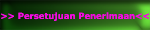
<style>
.page{position:relative;width:150px;height:30px}
.page>*{position:absolute;margin:0}
.t1{font:8.6px "Verdana-Bold";color:#f10cde}
</style>
<div class="page">
<p class="t1" style="left:1px;top:12px;width:148px;height:9px">&gt;&gt; Persetujuan Penerimaan&lt;&lt;</p>
</div>
